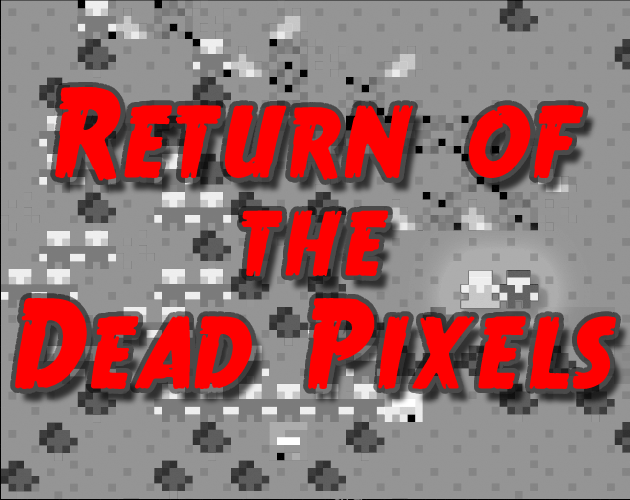
<style>
.page{position:relative;width:630px;height:500px;background:#959595}
.page>*{position:absolute;margin:0}
.t1{font:130px "TrueCrimes";color:#ff0000}
.t2{font:117px "TrueCrimes";color:#ff0000}
</style>
<div class="page">
<p class="t1" style="left:55px;top:86px;width:529px;height:95px">Return of</p>
<p class="t2" style="left:241px;top:210px;width:148px;height:67px">the</p>
<p class="t1" style="left:14px;top:297px;width:125px;height:92px">De</p>
<p class="t1" style="left:134px;top:298px;width:483px;height:92px">ad Pixels</p>
</div>
